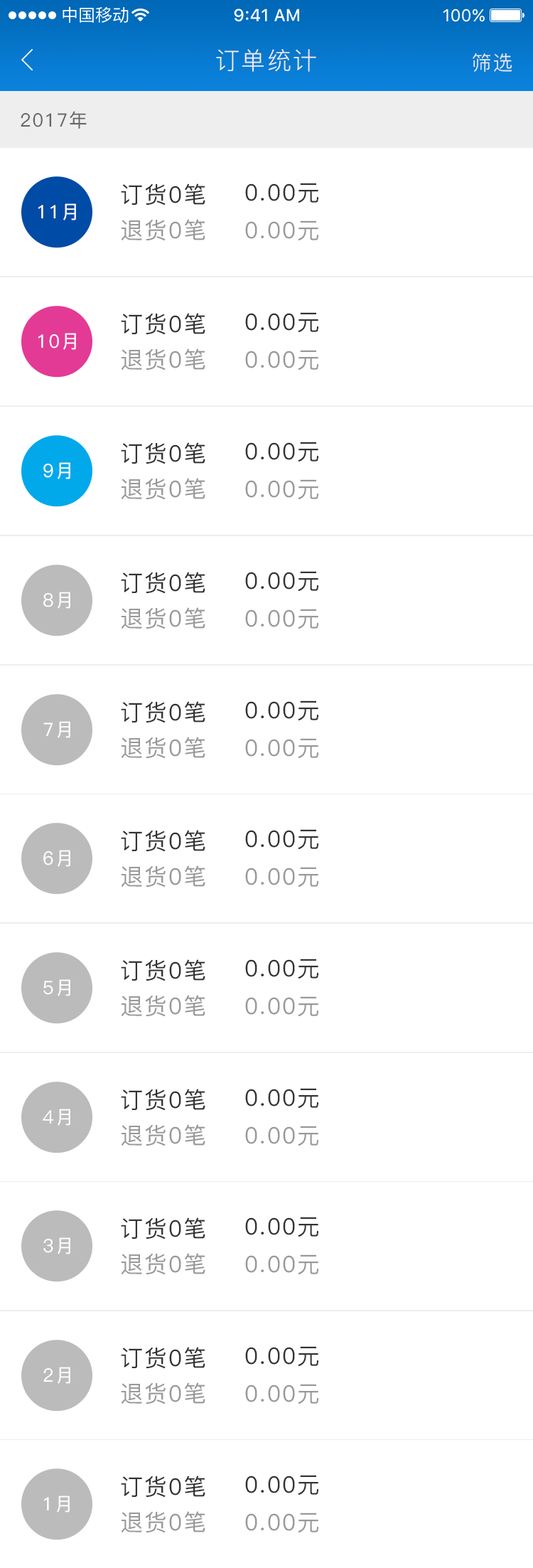
<style>
.page{position:relative;width:533px;height:1568px;background:#ffffff}
.page>*{position:absolute;margin:0}
.t1{font:24.2px "PingFang-SC-Regular";letter-spacing:0.06em;color:#eeeeee}
.t2{font:19.9px "PingFang-SC-Regular";letter-spacing:0.06em;color:#eeeeee}
.t3{font:18.5px "PingFang-SC-Medium";letter-spacing:0.06em;color:#666666}
.t4{font:22.8px "PingFang-SC-Medium";letter-spacing:0.06em;color:#333333}
.t5{font:18.5px "PingFang-SC-Medium";letter-spacing:0.06em;color:#ffffff}
.t6{font:22.8px "PingFang-SC-Medium";letter-spacing:0.06em;color:#999999}
</style>
<div class="page">
<p class="t1" style="left:216px;top:49px;width:100px;height:23px">订单统计</p>
<p class="t2" style="left:473px;top:53px;width:40px;height:19px">筛选</p>
<p class="t3" style="left:21px;top:111px;width:66px;height:18px">2017年</p>
<p class="t4" style="left:121px;top:183px;width:85px;height:23px">订货0笔</p>
<p class="t4" style="left:245px;top:183px;width:74px;height:20px">0.00元</p>
<p class="t5" style="left:38px;top:203px;width:38px;height:17px">11月</p>
<p class="t6" style="left:121px;top:219px;width:85px;height:22px">退货0笔</p>
<p class="t6" style="left:245px;top:220px;width:74px;height:21px">0.00元</p>
<p class="t4" style="left:121px;top:313px;width:85px;height:22px">订货0笔</p>
<p class="t4" style="left:245px;top:312px;width:74px;height:21px">0.00元</p>
<p class="t5" style="left:38px;top:333px;width:38px;height:17px">10月</p>
<p class="t6" style="left:121px;top:348px;width:85px;height:22px">退货0笔</p>
<p class="t6" style="left:245px;top:350px;width:74px;height:20px">0.00元</p>
<p class="t4" style="left:121px;top:442px;width:85px;height:22px">订货0笔</p>
<p class="t4" style="left:245px;top:442px;width:74px;height:20px">0.00元</p>
<p class="t5" style="left:43px;top:462px;width:27px;height:17px">9月</p>
<p class="t6" style="left:121px;top:478px;width:85px;height:22px">退货0笔</p>
<p class="t6" style="left:245px;top:479px;width:74px;height:21px">0.00元</p>
<p class="t4" style="left:121px;top:572px;width:85px;height:22px">订货0笔</p>
<p class="t4" style="left:245px;top:571px;width:74px;height:21px">0.00元</p>
<p class="t5" style="left:43px;top:592px;width:27px;height:17px">8月</p>
<p class="t6" style="left:121px;top:607px;width:85px;height:22px">退货0笔</p>
<p class="t6" style="left:245px;top:609px;width:74px;height:20px">0.00元</p>
<p class="t4" style="left:121px;top:701px;width:85px;height:22px">订货0笔</p>
<p class="t4" style="left:245px;top:700px;width:74px;height:21px">0.00元</p>
<p class="t5" style="left:43px;top:721px;width:27px;height:17px">7月</p>
<p class="t6" style="left:121px;top:737px;width:85px;height:22px">退货0笔</p>
<p class="t6" style="left:245px;top:738px;width:74px;height:21px">0.00元</p>
<p class="t4" style="left:121px;top:830px;width:85px;height:22px">订货0笔</p>
<p class="t4" style="left:245px;top:829px;width:74px;height:21px">0.00元</p>
<p class="t5" style="left:43px;top:850px;width:27px;height:17px">6月</p>
<p class="t6" style="left:121px;top:865px;width:85px;height:22px">退货0笔</p>
<p class="t6" style="left:245px;top:867px;width:74px;height:20px">0.00元</p>
<p class="t4" style="left:121px;top:959px;width:85px;height:22px">订货0笔</p>
<p class="t4" style="left:245px;top:959px;width:74px;height:20px">0.00元</p>
<p class="t5" style="left:43px;top:979px;width:27px;height:17px">5月</p>
<p class="t6" style="left:121px;top:995px;width:85px;height:22px">退货0笔</p>
<p class="t6" style="left:245px;top:996px;width:74px;height:21px">0.00元</p>
<p class="t4" style="left:121px;top:1089px;width:85px;height:22px">订货0笔</p>
<p class="t4" style="left:245px;top:1088px;width:74px;height:21px">0.00元</p>
<p class="t5" style="left:43px;top:1109px;width:27px;height:17px">4月</p>
<p class="t6" style="left:121px;top:1124px;width:85px;height:22px">退货0笔</p>
<p class="t6" style="left:245px;top:1126px;width:74px;height:20px">0.00元</p>
<p class="t4" style="left:121px;top:1217px;width:85px;height:22px">订货0笔</p>
<p class="t4" style="left:245px;top:1217px;width:74px;height:20px">0.00元</p>
<p class="t5" style="left:43px;top:1237px;width:27px;height:17px">3月</p>
<p class="t6" style="left:121px;top:1253px;width:85px;height:22px">退货0笔</p>
<p class="t6" style="left:245px;top:1254px;width:74px;height:21px">0.00元</p>
<p class="t4" style="left:121px;top:1347px;width:85px;height:22px">订货0笔</p>
<p class="t4" style="left:245px;top:1346px;width:74px;height:21px">0.00元</p>
<p class="t5" style="left:43px;top:1367px;width:27px;height:17px">2月</p>
<p class="t6" style="left:121px;top:1382px;width:85px;height:22px">退货0笔</p>
<p class="t6" style="left:245px;top:1384px;width:74px;height:20px">0.00元</p>
<p class="t4" style="left:121px;top:1476px;width:85px;height:22px">订货0笔</p>
<p class="t4" style="left:245px;top:1475px;width:74px;height:20px">0.00元</p>
<p class="t5" style="left:43px;top:1495px;width:27px;height:18px">1月</p>
<p class="t6" style="left:121px;top:1511px;width:85px;height:22px">退货0笔</p>
<p class="t6" style="left:245px;top:1513px;width:74px;height:20px">0.00元</p>
</div>
